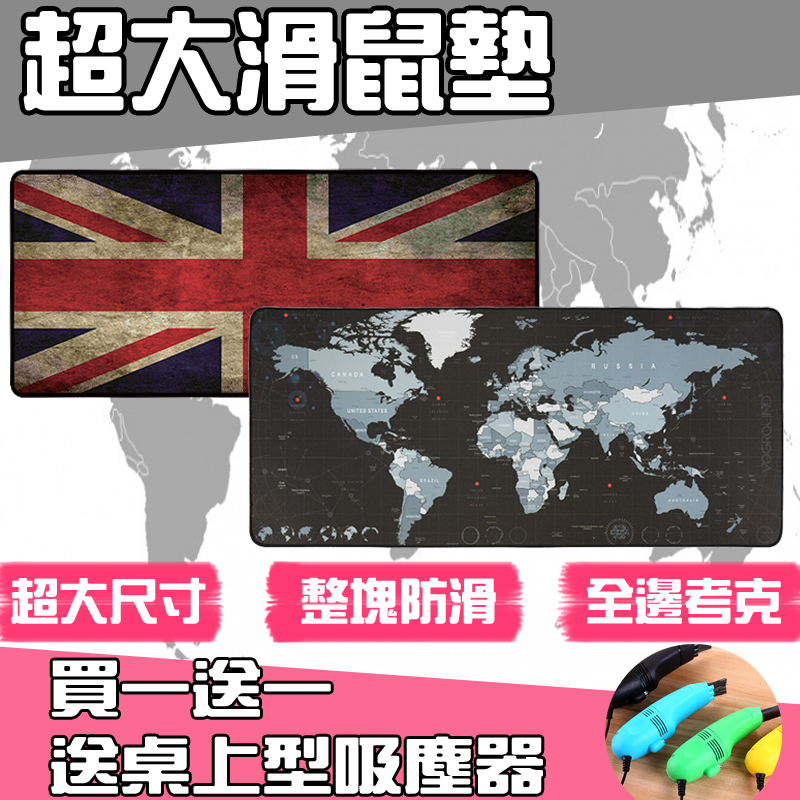
<style>
.page{position:relative;width:800px;height:800px}
.page>*{position:absolute;margin:0}
.t1{font:103.8px "HanWangZonYi";color:#ffffff;font-weight:bold}
.t2{font:48px "HanWangZonYi";color:#ffffff;font-weight:bold}
.t3{font:60px "HanWangZonYi";color:#ffffff;font-weight:bold;scale:1.15 1}
</style>
<div class="page">
<p class="t1" style="left:23px;top:10px;width:527px;height:101px">超大滑鼠墊</p>
<p class="t2" style="left:11px;top:577px;width:195px;height:47px">超大尺寸</p>
<p class="t2" style="left:301px;top:577px;width:195px;height:47px">整塊防滑</p>
<p class="t2" style="left:587px;top:577px;width:194px;height:47px">全邊考克</p>
<p class="t3" style="left:51px;top:660px;width:492px;height:134px">買一送一 <br>送桌上型吸塵器</p>
</div>
